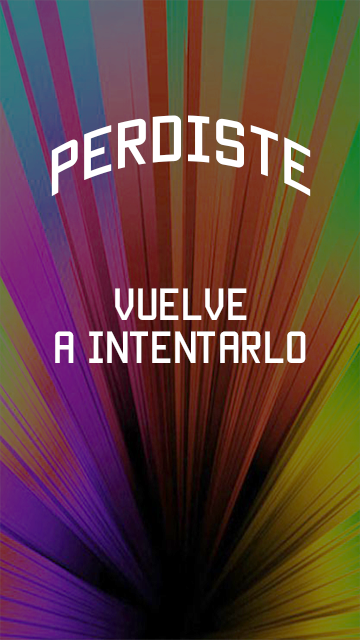
<style>
.page{position:relative;width:360px;height:640px}
.page>*{position:absolute;margin:0}
.t1{font:52px "Manteka";color:#ffffff}
.t2{font:36px "Manteka";color:#ffffff}
</style>
<div class="page">
<p class="t1" style="left:51px;top:115px;width:260px;height:82px">Perdiste</p>
<p class="t2" style="left:55px;top:288px;width:251px;height:75px;text-align:center">VUELVE<br>A INTENTARLO</p>
</div>
